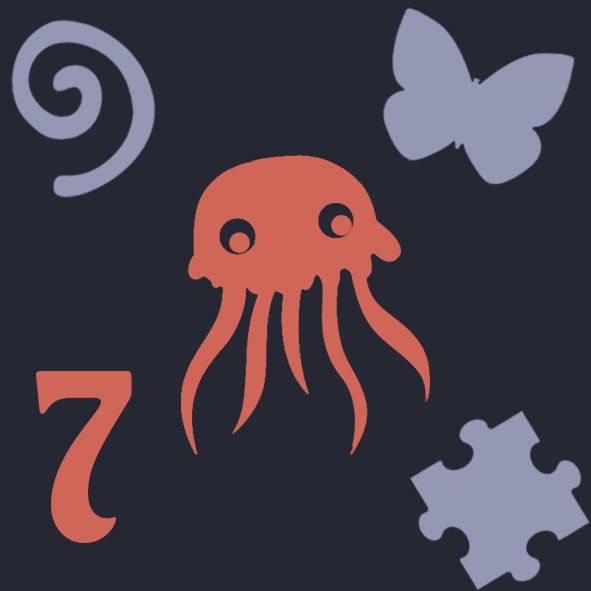
<style>
.page{position:relative;width:591px;height:591px;background:#252733}
.page>*{position:absolute;margin:0}
.t1{font:208.3px "HoboStd";color:#d06658}
</style>
<div class="page">
<p class="t1" style="left:36px;top:370px;width:96px;height:173px">7</p>
</div>
